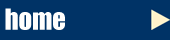
<style>
.page{position:relative;width:170px;height:40px;background:#003366}
.page>*{position:absolute;margin:0}
.t1{font:46px "Impact";color:#fffffe}
</style>
<div class="page">
<p class="t1" style="left:5px;top:8px;width:60px;height:22px">home</p>
</div>
